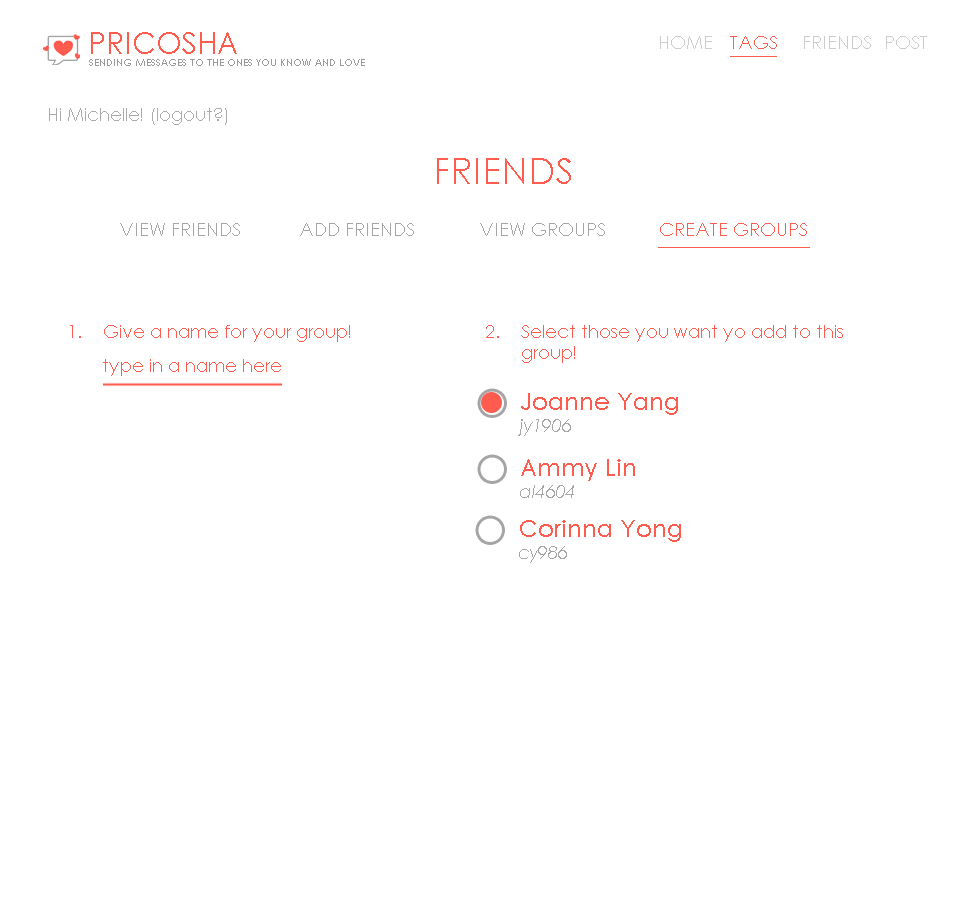
<style>
.page{position:relative;width:960px;height:900px;background:#ffffff}
.page>*{position:absolute;margin:0}
.t1{font:30px "CenturyGothic";color:#ff5c50}
.t2{font:18px "CenturyGothic";color:#cccccc}
.t3{font:18px "CenturyGothic";color:#ff5c50}
.t4{font:10px "CenturyGothic";color:#999999}
.t5{font:18px "CenturyGothic";color:#aaaaaa}
.t6{font:36px "CenturyGothic";color:#ff5c50}
.t7{font:18px "CenturyGothic";color:#a5a5a5}
.t8{font:24px "CenturyGothic";color:#ff5c50}
.t9{font:18px "CenturyGothic-Italic";color:#a5a5a5}
</style>
<div class="page">
<p class="t1" style="left:91px;top:32px;width:146px;height:22px">PRICOSHA</p>
<p class="t2" style="left:660px;top:36px;width:267px;height:13px">HOME <span class="t3">TAGS</span> FRIENDS   POST</p>
<p class="t4" style="left:89px;top:59px;width:276px;height:7px">SENDING MESSAGES TO THE ONES YOU KNOW AND LOVE</p>
<p class="t5" style="left:49px;top:108px;width:178px;height:17px">Hi Michelle! (logout?)</p>
<p class="t6" style="left:437px;top:158px;width:134px;height:26px">FRIENDS</p>
<p class="t7" style="left:120px;top:223px;width:687px;height:13px">VIEW FRIENDS  ADD FRIENDS  VIEW GROUPS  <span class="t3">CREATE GROUPS</span></p>
<p class="t3" style="left:70px;top:325px;width:280px;height:17px">1. Give a name for your group!</p>
<p class="t3" style="left:486px;top:325px;width:357px;height:38px">2. Select those you want yo add to this<br> group!</p>
<p class="t3" style="left:103px;top:359px;width:178px;height:17px">type in a name here</p>
<p class="t8" style="left:518px;top:393px;width:160px;height:43px">Joanne Yang<br><span class="t9">jy1906</span></p>
<p class="t8" style="left:520px;top:459px;width:115px;height:39px">Ammy Lin<br><span class="t9">al4604</span></p>
<p class="t8" style="left:519px;top:520px;width:162px;height:43px">Corinna Yong<br><span class="t9">cy986</span></p>
</div>
